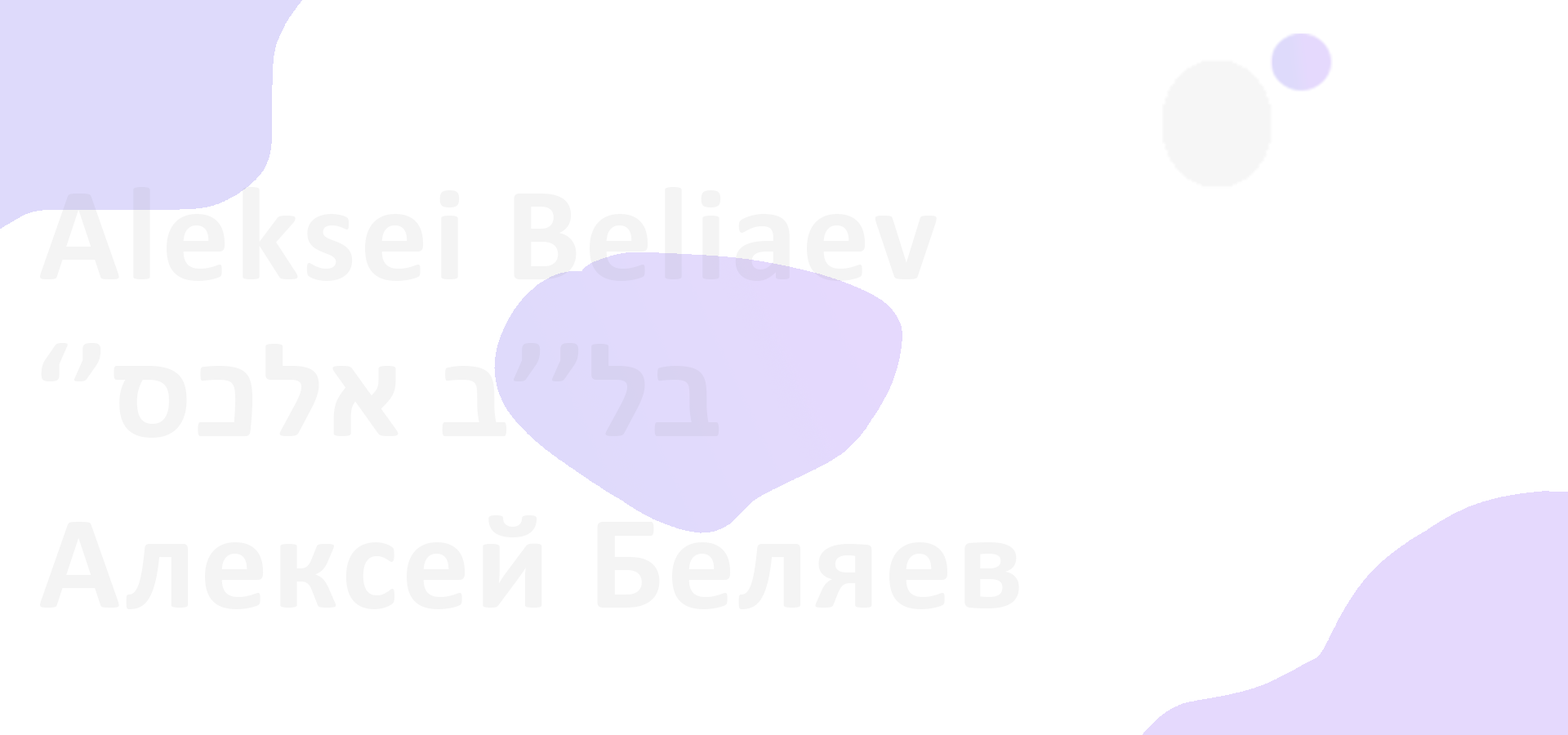
<style>
.page{position:relative;width:1568px;height:735px;background:#ffffff}
.page>*{position:absolute;margin:0}
.t1{font:135.4px "Calibri-Bold";letter-spacing:0.03em;color:#f4f4f4}
</style>
<div class="page">
<p class="t1" style="left:40px;top:187px;width:897px;height:94px">Aleksei Beliaev</p>
<p class="t1" style="left:41px;top:343px;width:678px;height:95px">‘’סכלא ב’’לב</p>
<p class="t1" style="left:40px;top:515px;width:979px;height:94px">Алексей Беляев</p>
</div>
